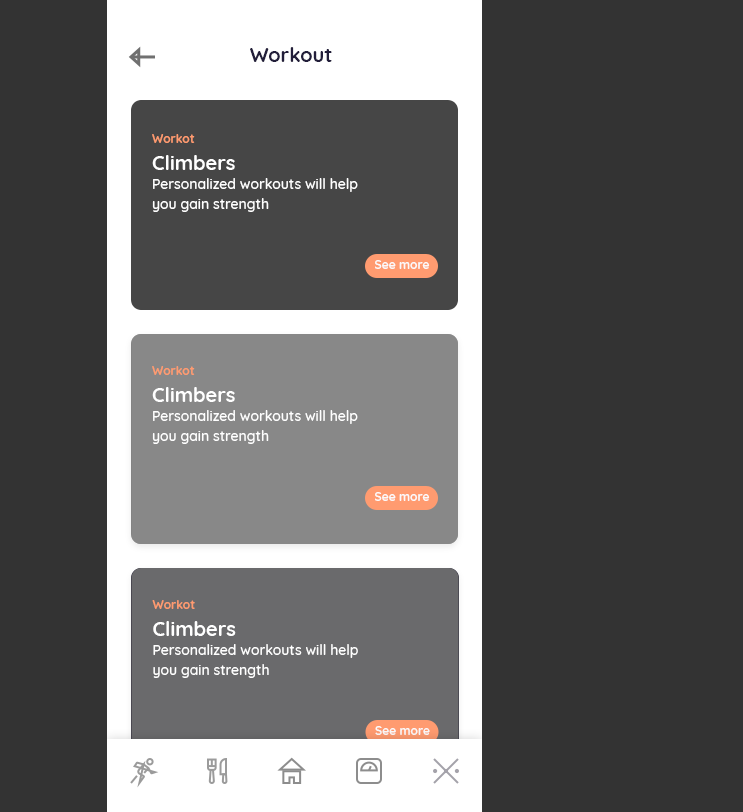
<style>
.page{position:relative;width:743px;height:812px;background:#333333}
.page>*{position:absolute;margin:0}
.t1{font:20px "Quicksand-Bold";color:#221e3a}
.t2{font:12px "Quicksand-Bold";color:#ff9b70}
.t3{font:20px "Quicksand-Bold";color:#ffffff}
.t4{font:14px/20px "Quicksand-Medium";color:#ffffff}
.t5{font:12px "Quicksand-Bold";color:#fbf9f9}
</style>
<div class="page">
<p class="t1" style="left:250px;top:47px;width:82px;height:15px">Workout</p>
<p class="t2" style="left:152px;top:134px;width:43px;height:9px">Workot</p>
<p class="t3" style="left:152px;top:155px;width:83px;height:15px">Climbers</p>
<p class="t4" style="left:152px;top:178px;width:206px;height:34px">Personalized workouts will help you gain strength</p>
<p class="t5" style="left:375px;top:260px;width:55px;height:9px">See more</p>
<p class="t2" style="left:152px;top:366px;width:43px;height:9px">Workot</p>
<p class="t3" style="left:152px;top:387px;width:83px;height:15px">Climbers</p>
<p class="t4" style="left:152px;top:410px;width:206px;height:34px">Personalized workouts will help you gain strength</p>
<p class="t5" style="left:375px;top:492px;width:55px;height:9px">See more</p>
<p class="t2" style="left:152px;top:600px;width:43px;height:9px">Workot</p>
<p class="t3" style="left:153px;top:621px;width:83px;height:15px">Climbers</p>
<p class="t4" style="left:153px;top:644px;width:205px;height:34px">Personalized workouts will help you gain strength</p>
<p class="t5" style="left:375px;top:726px;width:55px;height:9px">See more</p>
</div>
